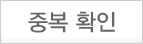
<style>
.page{position:relative;width:143px;height:44px;background:#ffffff}
.page>*{position:absolute;margin:0}
.t1{font:23px "YDVYGO33";color:#666666;scale:0.95 1}
</style>
<div class="page">
<p class="t1" style="left:28px;top:11px;width:87px;height:22px">중복 확인</p>
</div>
